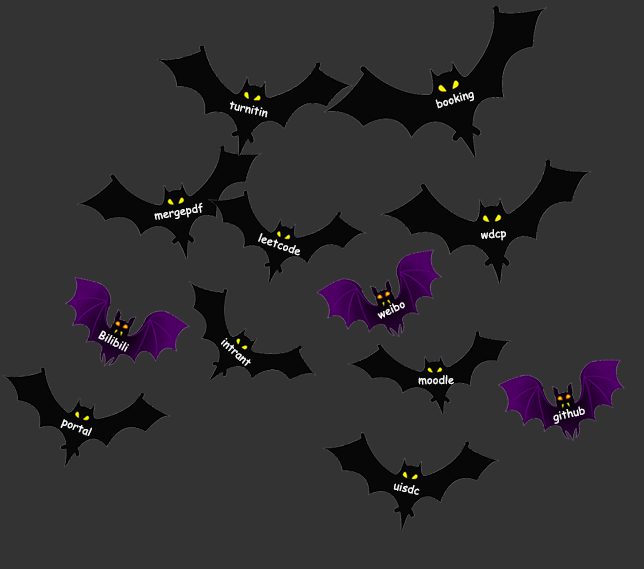
<style>
.page{position:relative;width:644px;height:569px;background:#333333}
.page>*{position:absolute;margin:0}
.t1{font:11px "ComicSansMS";color:#f7f8f8}
</style>
<div class="page">
<p class="t1" style="left:230px;top:101px;width:38px;height:17px;rotate:13deg">turnitin</p>
<p class="t1" style="left:435px;top:92px;width:39px;height:17px;rotate:-17deg">booking</p>
<p class="t1" style="left:154px;top:202px;width:49px;height:18px;rotate:-10deg">mergepdf</p>
<p class="t1" style="left:258px;top:233px;width:42px;height:23px;rotate:19deg">leetcode</p>
<p class="t1" style="left:481px;top:229px;width:25px;height:12px;rotate:-5deg">wdcp</p>
<p class="t1" style="left:377px;top:302px;width:28px;height:17px;rotate:-26deg">weibo</p>
<p class="t1" style="left:98px;top:330px;width:31px;height:22px;rotate:28deg">Bilibili</p>
<p class="t1" style="left:221px;top:338px;width:30px;height:28px;rotate:42deg">intrant</p>
<p class="t1" style="left:418px;top:375px;width:36px;height:10px">moodle</p>
<p class="t1" style="left:553px;top:406px;width:32px;height:18px;rotate:-13deg">github</p>
<p class="t1" style="left:60px;top:419px;width:32px;height:17px;rotate:23deg">portal</p>
<p class="t1" style="left:393px;top:482px;width:27px;height:13px;rotate:12deg">uisdc</p>
</div>
